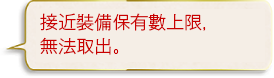
<style>
.page{position:relative;width:274px;height:78px;background:#f5eee6}
.page>*{position:absolute;margin:0}
.t1{font:18px/24px "GothicMB101Pr6N-Light";color:#c90000}
</style>
<div class="page">
<p class="t1" style="left:40px;top:13px;width:166px;height:42px">接近裝備保有數上限，<br>無法取出。</p>
</div>
